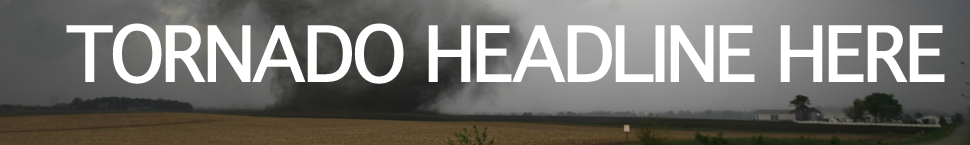
<style>
.page{position:relative;width:970px;height:145px}
.page>*{position:absolute;margin:0}
.t1{font:75px "Thonburi-Bold";letter-spacing:-0.05em;color:#ffffff}
</style>
<div class="page">
<p class="t1" style="left:66px;top:23px;width:879px;height:61px">TORNADO HEADLINE HERE</p>
</div>
